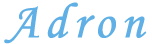
<style>
.page{position:relative;width:152px;height:44px;background:#ffffff}
.page>*{position:absolute;margin:0}
.t1{font:50px "MonotypeCorsiva";letter-spacing:0.1em;color:#60b0e5;font-weight:bold}
</style>
<div class="page">
<p class="t1" style="left:4px;top:2px;width:143px;height:42px">Adron</p>
</div>
